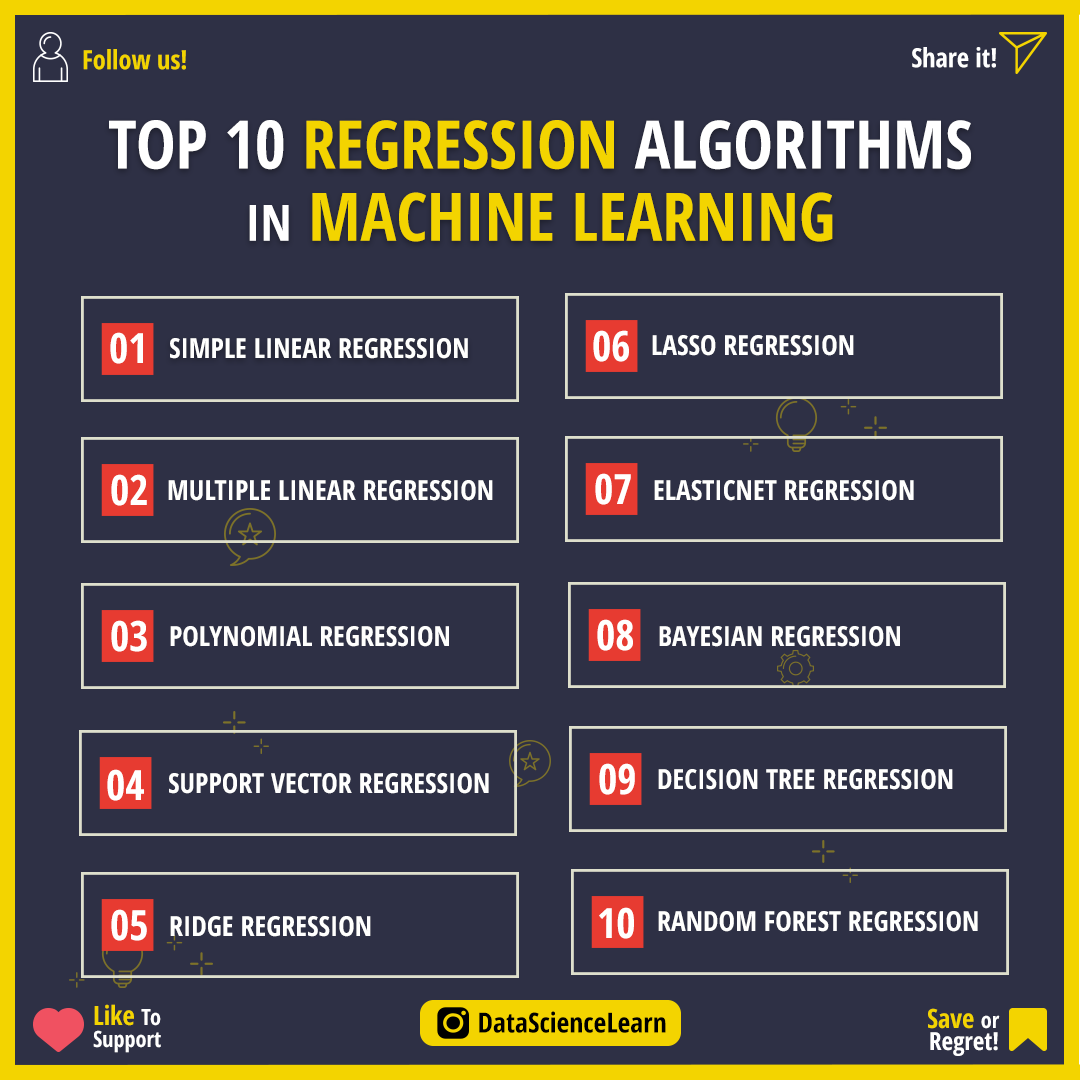
<style>
.page{position:relative;width:1080px;height:1080px;background:#2e3045}
.page>*{position:absolute;margin:0}
.t1{font:26.4px "OpenSans-CondensedBold";color:#f3d400}
.t2{font:26.4px "OpenSans-CondensedBold";color:#ffffff}
.t3{font:66.7px/72.2px "OpenSans-CondensedBold";color:#f3d400}
.t4{font:66.7px/72.2px "OpenSans-CondensedBold";color:#ffffff}
.t5{font:50px/72.2px "OpenSans-CondensedBold";color:#ffffff}
.t6{font:41.7px "OpenSans-CondensedBold";color:#fffffe}
.t7{font:27.8px "OpenSans-CondensedBold";color:#fffffe}
.t8{font:22.2px/22.2px "OpenSans-CondensedBold";color:#ffffff}
.t9{font:26.4px/22.2px "OpenSans-CondensedBold";color:#f3d400}
.t10{font:27.8px "OpenSans-CondensedBold";color:#000000}
.t11{font:25px/22.2px "OpenSans-CondensedBold";color:#ffffff}
</style>
<div class="page">
<p class="t1" style="left:83px;top:49px;width:103px;height:21px">Follow us!</p>
<p class="t2" style="left:912px;top:47px;width:84px;height:21px">Share it!</p>
<p class="t3" style="left:109px;top:120px;width:862px;height:122px;text-align:center"><span class="t4">TOP 10 </span>REGRESSION <span class="t4">ALGORITHMS<br></span><span class="t5">IN</span> MACHINE LEARNING</p>
<p class="t6" style="left:110px;top:332px;width:33px;height:32px">01</p>
<p class="t7" style="left:170px;top:338px;width:298px;height:21px">SIMPLE LINEAR REGRESSION</p>
<p class="t6" style="left:593px;top:330px;width:36px;height:32px">06</p>
<p class="t7" style="left:652px;top:335px;width:202px;height:21px">LASSO REGRESSION</p>
<p class="t6" style="left:595px;top:473px;width:36px;height:32px">07</p>
<p class="t6" style="left:111px;top:474px;width:36px;height:32px">02</p>
<p class="t7" style="left:168px;top:480px;width:325px;height:21px">MULTIPLE LINEAR REGRESSION</p>
<p class="t7" style="left:654px;top:480px;width:260px;height:21px">ELASTICNET REGRESSION</p>
<p class="t6" style="left:111px;top:620px;width:36px;height:32px">03</p>
<p class="t7" style="left:170px;top:626px;width:279px;height:21px">POLYNOMIAL REGRESSION</p>
<p class="t6" style="left:597px;top:619px;width:36px;height:32px">08</p>
<p class="t7" style="left:659px;top:626px;width:241px;height:21px">BAYESIAN REGRESSION</p>
<p class="t6" style="left:107px;top:769px;width:37px;height:32px">04</p>
<p class="t7" style="left:169px;top:773px;width:320px;height:21px">SUPPORT VECTOR REGRESSION</p>
<p class="t6" style="left:599px;top:763px;width:36px;height:32px">09</p>
<p class="t7" style="left:658px;top:769px;width:295px;height:21px">DECISION TREE REGRESSION</p>
<p class="t6" style="left:111px;top:909px;width:36px;height:32px">05</p>
<p class="t7" style="left:170px;top:916px;width:201px;height:21px">RIDGE REGRESSION</p>
<p class="t6" style="left:599px;top:907px;width:35px;height:32px">10</p>
<p class="t7" style="left:658px;top:911px;width:320px;height:21px">RANDOM FOREST REGRESSION</p>
<p class="t8" style="left:93px;top:1004px;width:68px;height:49px"><span class="t9">Like </span>To<br>Support</p>
<p class="t10" style="left:479px;top:1011px;width:187px;height:22px">DataScienceLearn</p>
<p class="t11" style="left:928px;top:1008px;width:72px;height:48px;text-align:right"><span class="t9">Save </span><span class="t8">or<br></span>Regret!</p>
</div>
